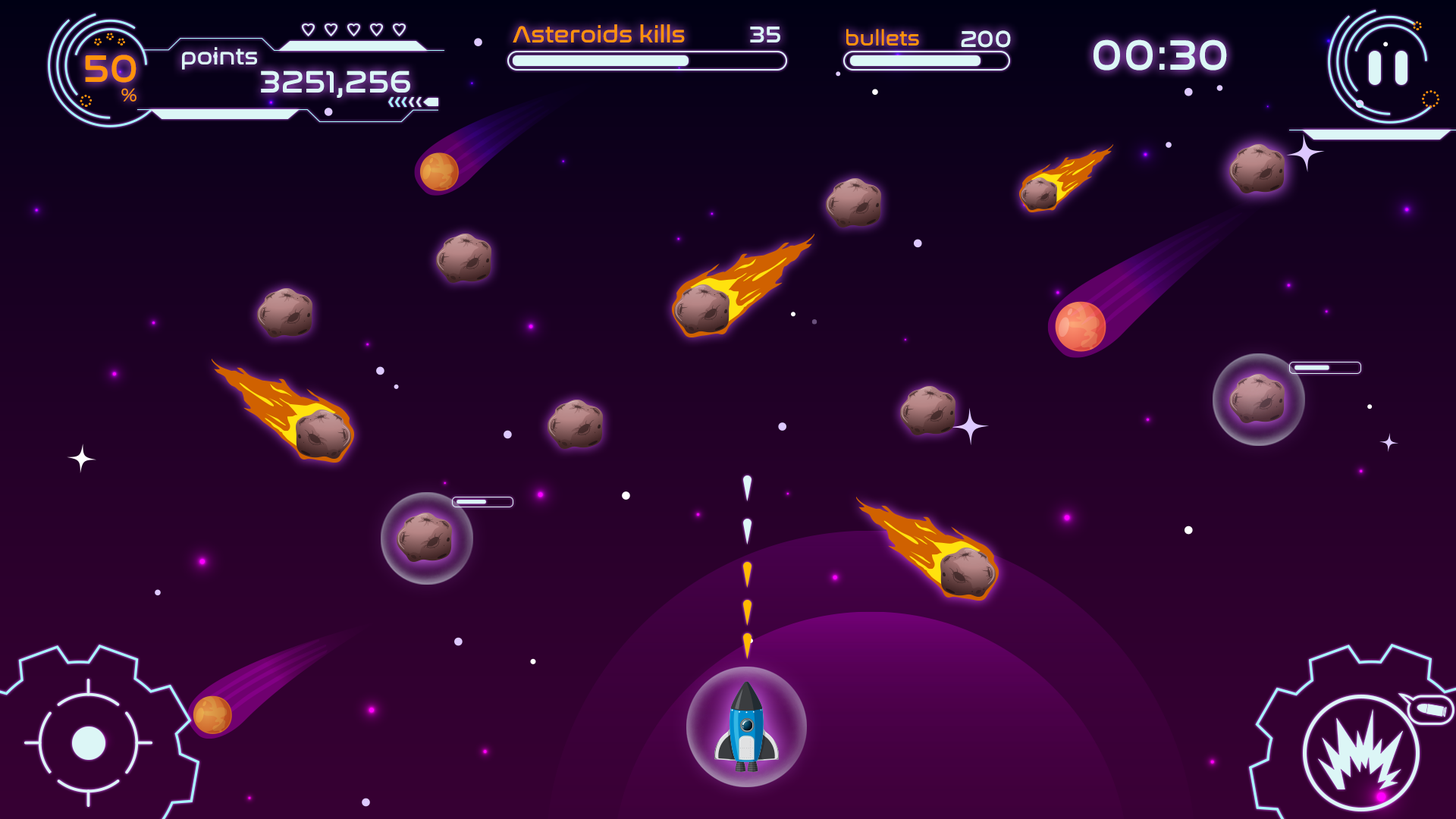
<style>
.page{position:relative;width:1456px;height:819px}
.page>*{position:absolute;margin:0}
.t1{font:23.7px "NasalizationRg-Regular";color:#ff920b}
.t2{font:23.7px "NasalizationRg-Regular";color:#dcf6f6}
.t3{font:21.3px "NasalizationRg-Regular";color:#ff920b}
.t4{font:43.4px "NasalizationRg-Regular";color:#dcf6f6}
.t5{font:39.5px "NasalizationRg-Regular";color:#ff920b}
.t6{font:31.6px "NasalizationRg-Regular";color:#dcf6f6}
.t7{font:18.7px "NasalizationRg-Regular";color:#ff920b}
</style>
<div class="page">
<p class="t1" style="left:513px;top:24px;width:172px;height:18px">Asteroids kills</p>
<p class="t2" style="left:750px;top:27px;width:30px;height:15px">35</p>
<p class="t3" style="left:846px;top:29px;width:73px;height:16px">bullets</p>
<p class="t2" style="left:961px;top:30px;width:50px;height:18px">200</p>
<p class="t4" style="left:1094px;top:39px;width:133px;height:32px">00:30</p>
<p class="t2" style="left:182px;top:47px;width:75px;height:23px">points</p>
<p class="t5" style="left:85px;top:55px;width:51px;height:28px">50</p>
<p class="t6" style="left:261px;top:71px;width:149px;height:27px">3251,256</p>
<p class="t7" style="left:121px;top:88px;width:15px;height:14px">%</p>
</div>
